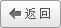
<style>
.page{position:relative;width:61px;height:28px}
.page>*{position:absolute;margin:0}
.t1{font:12px "SimSun";letter-spacing:0.16em;color:#555555}
</style>
<div class="page">
<p class="t1" style="left:25px;top:8px;width:25px;height:11px">返回</p>
</div>
